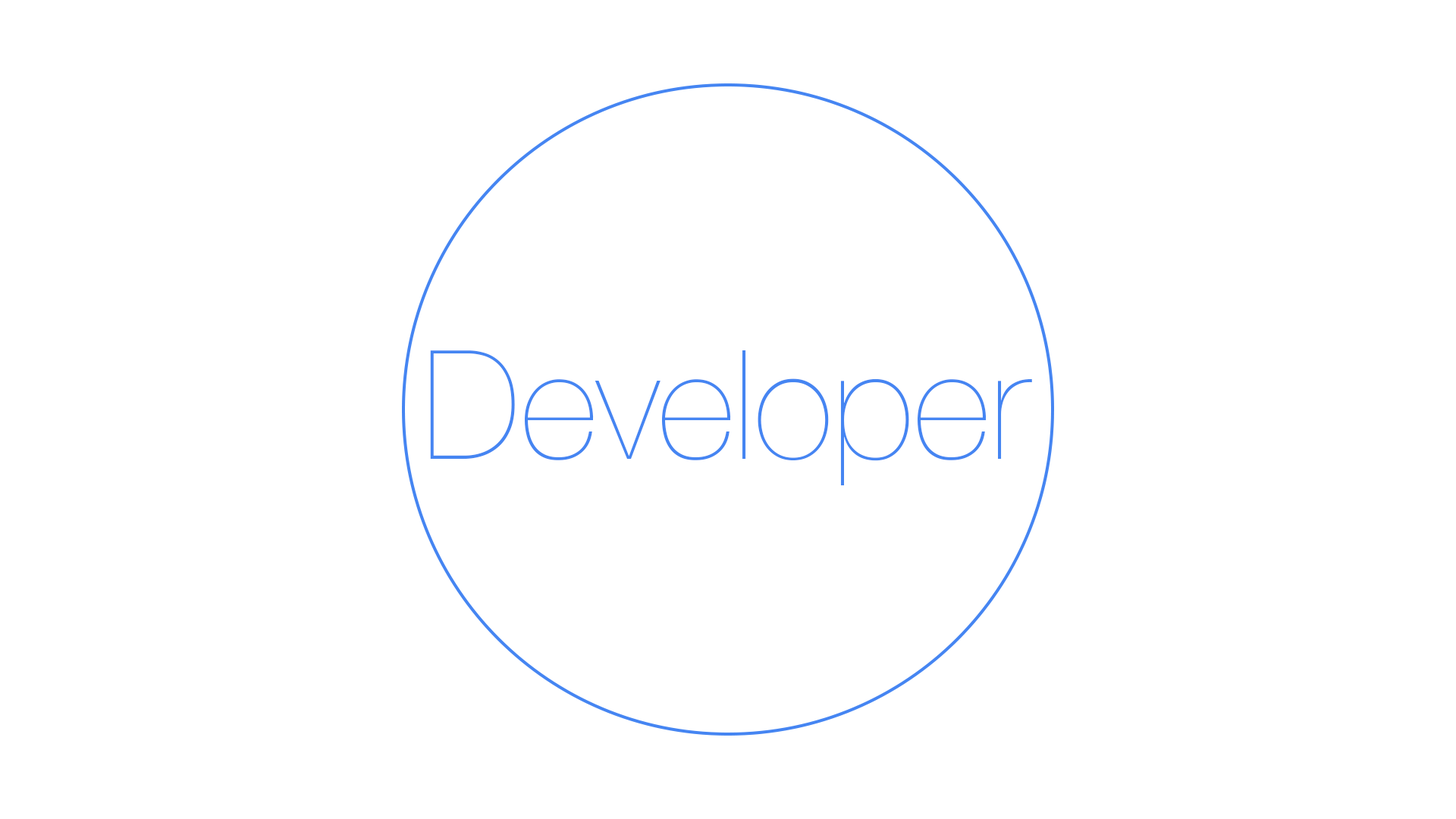
<style>
.page{position:relative;width:1456px;height:819px;background:#ffffff}
.page>*{position:absolute;margin:0}
.t1{font:151.7px "HelveticaNeue-UltraLight";color:#4585f2}
</style>
<div class="page">
<p class="t1" style="left:430px;top:350px;width:602px;height:135px">Developer</p>
</div>
